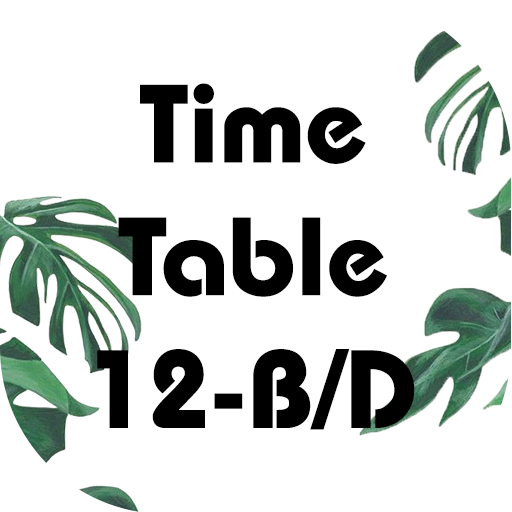
<style>
.page{position:relative;width:512px;height:512px;background:#ffffff}
.page>*{position:absolute;margin:0}
.t1{font:110.6px "BauhausStd-Bold";color:#000000}
</style>
<div class="page">
<p class="t1" style="left:97px;top:83px;width:318px;height:347px;text-align:center">Time<br>Table<br>12-B/D</p>
</div>
